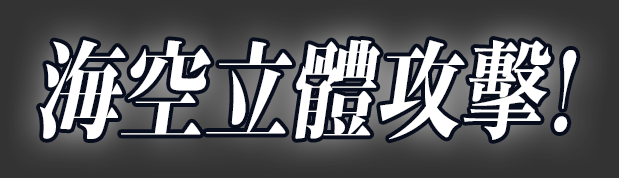
<style>
.page{position:relative;width:619px;height:178px}
.page>*{position:absolute;margin:0}
.t1{font:106.1px "KochoStd-Heavy";color:#ffffff;font-style:italic;scale:0.8 1}
.t2{font:106.1px "RyuminPro-ExBold";color:#ffffff;font-style:italic;scale:0.8 1}
</style>
<div class="page">
<p class="t1" style="left:40px;top:40px;width:537px;height:100px">海空立體攻<span class="t2">擊</span>!</p>
</div>
